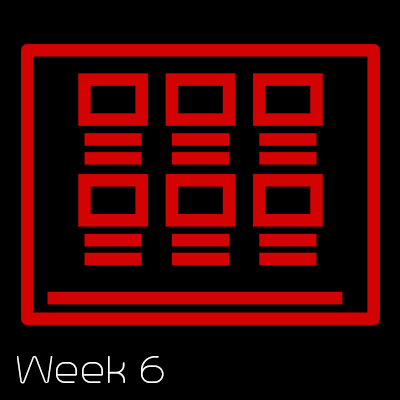
<style>
.page{position:relative;width:400px;height:400px;background:#000000}
.page>*{position:absolute;margin:0}
.t1{font:49px "Trench-Thin";color:#ffffff}
</style>
<div class="page">
<p class="t1" style="left:17px;top:356px;width:147px;height:28px">Week 6</p>
</div>
